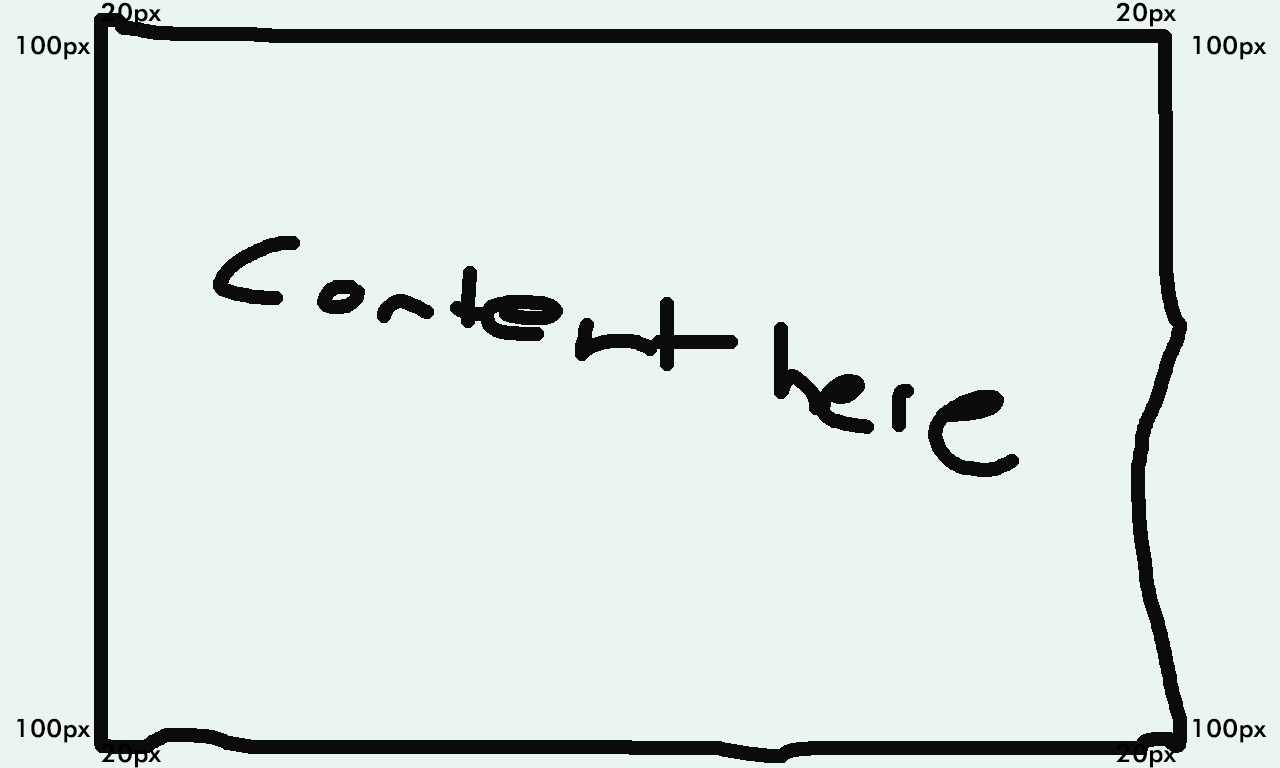
<style>
.page{position:relative;width:1280px;height:768px;background:#e9f4f3}
.page>*{position:absolute;margin:0}
.t1{font:25px "FuturaBT-Medium";letter-spacing:0.01em;color:#000000;scale:1.05 1}
</style>
<div class="page">
<p class="t1" style="left:101px;top:2px;width:60px;height:25px">20px</p>
<p class="t1" style="left:1116px;top:2px;width:60px;height:25px">20px</p>
<p class="t1" style="left:17px;top:35px;width:74px;height:25px">100pxv</p>
<p class="t1" style="left:1193px;top:35px;width:74px;height:25px">100pxv</p>
<p class="t1" style="left:17px;top:718px;width:74px;height:25px">100pxv</p>
<p class="t1" style="left:1193px;top:718px;width:74px;height:25px">100pxv</p>
<p class="t1" style="left:101px;top:743px;width:60px;height:25px">20px</p>
<p class="t1" style="left:1116px;top:743px;width:60px;height:25px">20px</p>
</div>
